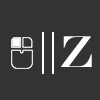
<style>
.page{position:relative;width:100px;height:100px;background:#333333}
.page>*{position:absolute;margin:0}
.t1{font:45.4px "EngraversMT";color:#ffffff}
</style>
<div class="page">
<p class="t1" style="left:61px;top:36px;width:31px;height:31px">z</p>
</div>
